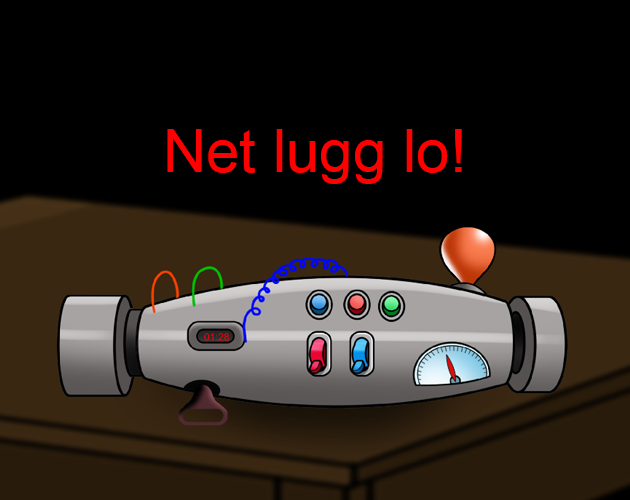
<style>
.page{position:relative;width:630px;height:500px;background:#000000}
.page>*{position:absolute;margin:0}
.t1{font:60px "ArialMT";color:#ff0000}
</style>
<div class="page">
<p class="t1" style="left:167px;top:129px;width:295px;height:55px">Net lugg lo!</p>
</div>
